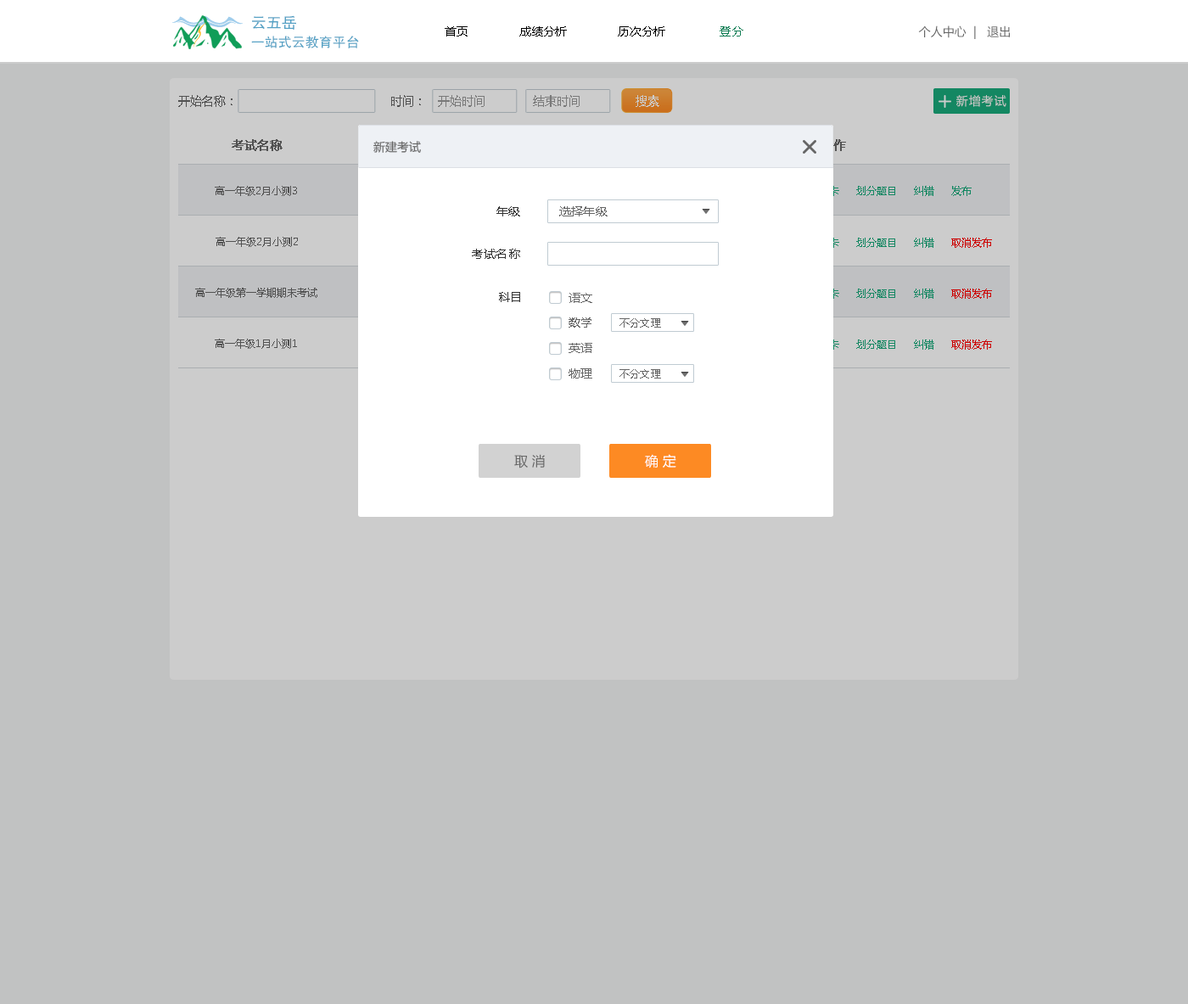
<style>
.page{position:relative;width:1188px;height:1004px;background:#c1c2c2}
.page>*{position:absolute;margin:0}
.t1{font:13.6px/20.4px "FZHTK--GBK1-0";color:#53a0c4}
.t2{font:15.3px/20.4px "FZHTK--GBK1-0";color:#53a0c4}
.t3{font:11.9px "MicrosoftYaHei";color:#000000;text-transform:uppercase}
.t4{font:11.9px "MicrosoftYaHei";color:#107d54;text-transform:uppercase}
.t5{font:11.9px "MicrosoftYaHei";color:#666666;text-transform:uppercase}
.t6{font:11.9px "MicrosoftYaHei";color:#666666}
.t7{font:11.9px "MicrosoftYaHei";color:#7a7a7a}
.t8{font:11.9px "MicrosoftYaHei";color:#cccccc}
.t9{font:11.9px "MicrosoftYaHei";letter-spacing:0.07em;color:#cccccc}
.t10{font:11.9px "MicrosoftYaHei";color:#666666;font-weight:bold}
.t11{font:11.9px "MicrosoftYaHei";font-weight:bold}
.t12{font:10.2px "MicrosoftYaHei";color:#666666}
.t13{font:10.2px "MicrosoftYaHei"}
.t14{font:11.9px "MicrosoftYaHei";letter-spacing:0.02em;color:#333333}
.t15{font:11.9px "MicrosoftYaHei";letter-spacing:0.02em;color:#666666}
.t16{font:10.2px "MicrosoftYaHei";letter-spacing:0.02em;color:#666666}
.t17{font:13.6px "MicrosoftYaHei";color:#666666;text-transform:uppercase}
.t18{font:13.6px "MicrosoftYaHei";color:#ffffff;text-transform:uppercase}
</style>
<div class="page">
<p class="t1" style="left:251px;top:15px;width:108px;height:33px"><span class="t2">云五岳<br></span>一站式云教育平台</p>
<p class="t3" style="left:445px;top:26px;width:298px;height:10px">首页               成绩分析               历次分析                <span class="t4">登分</span></p>
<p class="t5" style="left:918px;top:25px;width:92px;height:14px">个人中心  |   退出</p>
<p class="t6" style="left:178px;top:95px;width:54px;height:12px">开始名称：</p>
<p class="t6" style="left:391px;top:95px;width:30px;height:12px">时间：</p>
<p class="t7" style="left:438px;top:95px;width:47px;height:12px">开始时间</p>
<p class="t7" style="left:533px;top:95px;width:47px;height:12px">结束时间</p>
<p class="t8" style="left:636px;top:95px;width:23px;height:12px">搜索</p>
<p class="t9" style="left:956px;top:95px;width:50px;height:12px">新增考试</p>
<p class="t10" style="left:232px;top:139px;width:51px;height:12px">考试名称</p>
<p class="t6" style="left:373px;top:141px;width:48px;height:12px">新建考试</p>
<p class="t11" style="left:821px;top:139px;width:25px;height:12px">操作</p>
<p class="t12" style="left:215px;top:186px;width:82px;height:10px">高一年级2月小测3</p>
<p class="t13" style="left:693px;top:186px;width:279px;height:10px">查看考生     删除     选择答题卡     划分题目     纠错     发布</p>
<p class="t14" style="left:496px;top:206px;width:24px;height:10px">年级</p>
<p class="t15" style="left:559px;top:206px;width:49px;height:10px">选择年级</p>
<p class="t12" style="left:216px;top:237px;width:82px;height:10px">高一年级2月小测2</p>
<p class="t13" style="left:693px;top:238px;width:299px;height:10px">查看考生     删除     选择答题卡     划分题目     纠错     取消发布</p>
<p class="t14" style="left:472px;top:249px;width:48px;height:10px">考试名称</p>
<p class="t12" style="left:195px;top:288px;width:122px;height:10px">高一年级第一学期期末考试</p>
<p class="t14" style="left:499px;top:292px;width:21px;height:10px">科目</p>
<p class="t15" style="left:569px;top:293px;width:23px;height:10px">语文</p>
<p class="t13" style="left:693px;top:288px;width:299px;height:11px">查看考生     删除     选择答题卡     划分题目     纠错     取消发布</p>
<p class="t15" style="left:569px;top:317px;width:22px;height:11px">数学</p>
<p class="t16" style="left:619px;top:318px;width:42px;height:10px">不分文理</p>
<p class="t12" style="left:215px;top:339px;width:82px;height:10px">高一年级1月小测1</p>
<p class="t13" style="left:693px;top:339px;width:299px;height:11px">查看考生     删除     选择答题卡     划分题目     纠错     取消发布</p>
<p class="t15" style="left:569px;top:343px;width:23px;height:10px">英语</p>
<p class="t15" style="left:569px;top:368px;width:23px;height:10px">物理</p>
<p class="t16" style="left:619px;top:369px;width:42px;height:9px">不分文理</p>
<p class="t17" style="left:514px;top:454px;width:31px;height:14px">取 消</p>
<p class="t18" style="left:645px;top:454px;width:31px;height:14px">确 定</p>
</div>
